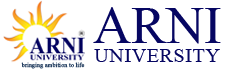
<style>
.page{position:relative;width:229px;height:70px;background:#ffffff}
.page>*{position:absolute;margin:0}
.t1{font:52.7px "TimesNewRomanPSMT";color:#060662}
.t2{font:20.2px "TimesNewRomanPSMT";letter-spacing:0.025em;color:#060662}
.t3{font:6px "TimesNewRomanPSMT";letter-spacing:0.025em;color:#294364}
</style>
<div class="page">
<p class="t1" style="left:93px;top:7px;width:128px;height:37px">ARNI</p>
<p class="t2" style="left:94px;top:49px;width:126px;height:13px">UNIVERSITY</p>
<p class="t3" style="left:21px;top:62px;width:64px;height:7px">bringing ambition to life</p>
</div>
